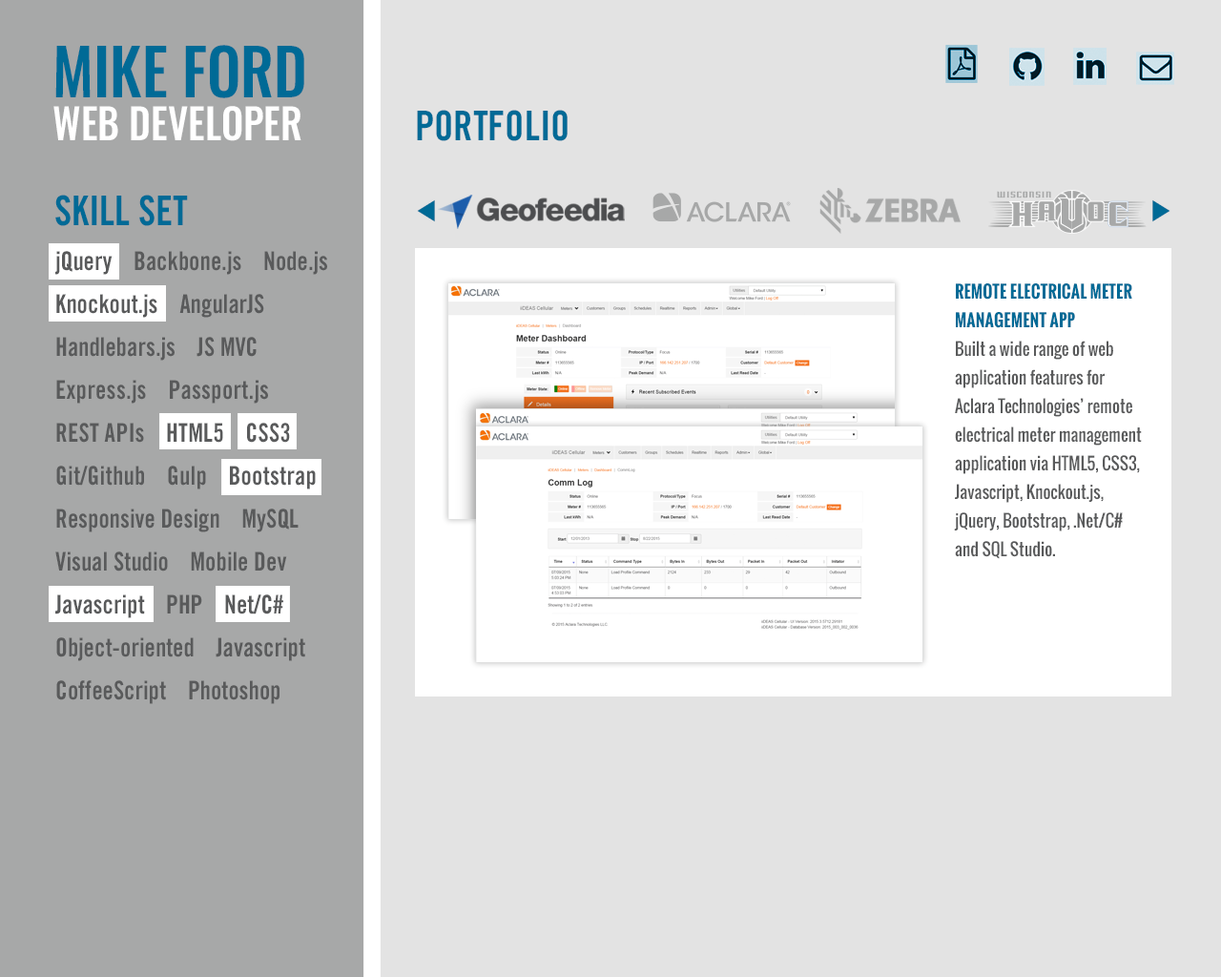
<style>
.page{position:relative;width:1221px;height:977px;background:#e3e3e3}
.page>*{position:absolute;margin:0}
.t1{font:41.7px/42.9px "Oswald-Medium";color:#ffffff}
.t2{font:63.6px/42.9px "Oswald-Medium";color:#006a96}
.t3{font:41px "TradeGothic-BoldCondTwenty";color:#006a96}
.t4{font:25.8px/42.9px "TradeGothic-BoldCondTwenty";color:#595a5b}
.t5{font:17.2px/28.6px "Oswald-Regular";color:#595a5b}
.t6{font:17.2px/28.6px "Oswald-Bold";color:#006a96;text-transform:uppercase}
</style>
<div class="page">
<p class="t1" style="left:53px;top:45px;width:251px;height:96px"><span class="t2">MIKE FORD<br></span>WEB DEVELOPER</p>
<p class="t3" style="left:417px;top:110px;width:151px;height:31px">PORTFOLIO</p>
<p class="t3" style="left:55px;top:195px;width:133px;height:31px">SKILL SET</p>
<p class="t4" style="left:55px;top:251px;width:272px;height:453px">jQuery    Backbone.js    Node.js<br>Knockout.js    AngularJS  <br>Handlebars.js    JS MVC<br>Express.js    Passport.js   REST APIs    HTML5    CSS3    Git/Github    Gulp    Bootstrap   <br>Responsive Design    MySQL<br>Visual Studio    Mobile Dev<br>Javascript    PHP    Net/C#<br>Object-oriented    Javascript<br>CoffeeScript    Photoshop</p>
<p class="t5" style="left:954px;top:283px;width:188px;height:276px"><span class="t6">Remote electrical meter management app<br></span>Built a wide range of web application features for Aclara Technologies’ remote electrical meter management application via HTML5, CSS3, Javascript, Knockout.js, jQuery, Bootstrap, .Net/C# and SQL Studio.</p>
</div>
